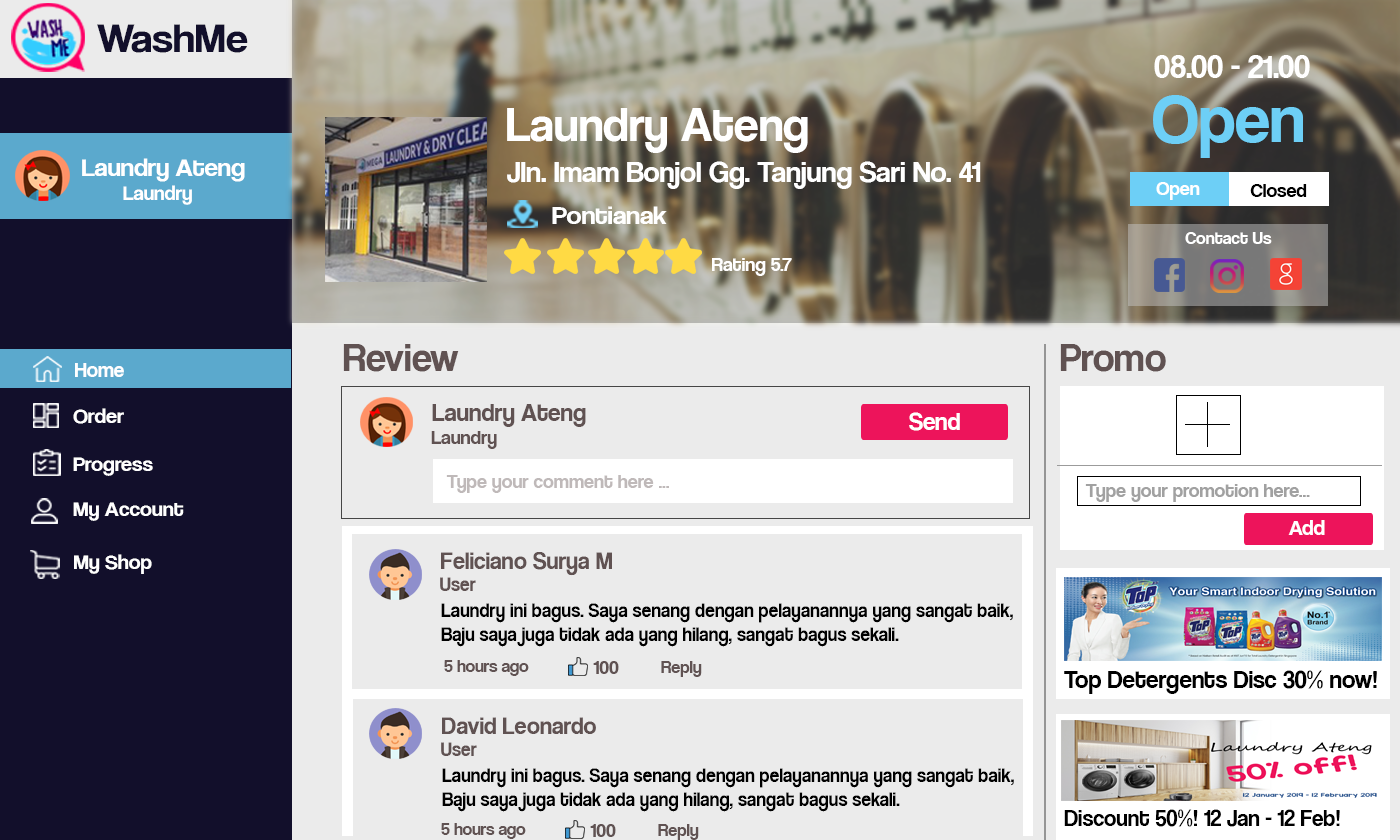
<style>
.page{position:relative;width:1400px;height:840px;background:#ebebeb}
.page>*{position:absolute;margin:0}
.t1{font:42.1px "CoolveticaRg-Regular";color:#120f2b;scale:1.05 1}
.t2{font:33px "CoolveticaRg-Regular";color:#ffffff}
.t3{font:70.4px "CoolveticaRg-Regular";color:#6dcff6}
.t4{font:48.8px "CoolveticaRg-Regular";color:#ffffff}
.t5{font:25.2px "CoolveticaRg-Regular";color:#ffffff;scale:1.05 1}
.t6{font:20px "CoolveticaRg-Regular";color:#ffffff;scale:1.05 1}
.t7{font:30px "CoolveticaRg-Regular";color:#ffffff}
.t8{font:20px "CoolveticaRg-Regular";color:#ffffff}
.t9{font:20px "CoolveticaRg-Regular";color:#000000}
.t10{font:25.6px "CoolveticaRg-Regular";color:#ffffff;scale:1.08 1}
.t11{font:18px "CoolveticaRg-Regular";color:#ffffff}
.t12{font:40px "CoolveticaRg-Regular";color:#605252}
.t13{font:21px "CoolveticaRg-Regular";color:#ffffff}
.t14{font:21px "CoolveticaRg-Regular";color:#ffffff;scale:1.05 1}
.t15{font:25px "CoolveticaRg-Regular";color:#605252}
.t16{font:25px "CoolveticaRg-Regular";color:#ffffff}
.t17{font:20px "CoolveticaRg-Regular";color:#605252}
.t18{font:20px "CoolveticaRg-Regular";color:#bfb9b9}
.t19{font:20px "CoolveticaRg-Regular";color:#a1a1a1}
.t20{font:22.2px "CoolveticaRg-Regular";color:#ffffff}
.t21{font:24.7px "CoolveticaRg-Regular";color:#605252}
.t22{font:19.7px "CoolveticaRg-Regular";color:#605252}
.t23{font:19.7px "CoolveticaRg-Regular";color:#000000}
.t24{font:17.8px "CoolveticaRg-Regular";color:#605252}
.t25{font:18px "CoolveticaRg-Regular";color:#605252}
.t26{font:25px "CoolveticaRg-Regular";color:#000000}
.t27{font:23px "CoolveticaRg-Regular";color:#000000}
</style>
<div class="page">
<p class="t1" style="left:97px;top:24px;width:151px;height:29px">WashMe</p>
<p class="t2" style="left:1154px;top:55px;width:156px;height:23px">08.00 - 21.00</p>
<p class="t3" style="left:1153px;top:95px;width:150px;height:63px">Open</p>
<p class="t4" style="left:507px;top:108px;width:301px;height:45px">Laundry Ateng</p>
<p class="t5" style="left:82px;top:158px;width:163px;height:47px">Laundry Ateng<br><span class="t6">        Laundry</span></p>
<p class="t7" style="left:507px;top:161px;width:474px;height:28px">Jln. Imam Bonjol Gg. Tanjung Sari No. 41</p>
<p class="t8" style="left:1156px;top:182px;width:44px;height:18px">Open</p>
<p class="t9" style="left:1250px;top:184px;width:57px;height:13px">Closed</p>
<p class="t10" style="left:552px;top:206px;width:115px;height:18px">Pontianak</p>
<p class="t11" style="left:1185px;top:232px;width:87px;height:12px">Contact Us</p>
<p class="t8" style="left:712px;top:258px;width:80px;height:18px">Rating 5.7</p>
<p class="t12" style="left:343px;top:344px;width:116px;height:28px">Review</p>
<p class="t12" style="left:1060px;top:344px;width:106px;height:28px">Promo</p>
<p class="t13" style="left:75px;top:363px;width:49px;height:14px">Home</p>
<p class="t14" style="left:73px;top:408px;width:51px;height:16px">Order</p>
<p class="t15" style="left:432px;top:404px;width:154px;height:23px">Laundry Ateng</p>
<p class="t16" style="left:909px;top:412px;width:51px;height:19px">Send</p>
<p class="t17" style="left:431px;top:431px;width:66px;height:18px">Laundry</p>
<p class="t14" style="left:73px;top:457px;width:80px;height:19px">Progress</p>
<p class="t18" style="left:446px;top:475px;width:223px;height:18px">Type your comment here ...</p>
<p class="t19" style="left:1085px;top:484px;width:225px;height:18px">Type your promotion here...</p>
<p class="t14" style="left:73px;top:502px;width:111px;height:19px">My Account</p>
<p class="t20" style="left:1288px;top:520px;width:37px;height:15px">Add</p>
<p class="t14" style="left:74px;top:554px;width:78px;height:20px">My Shop</p>
<p class="t21" style="left:441px;top:552px;width:171px;height:24px">Feliciano Surya M</p>
<p class="t22" style="left:440px;top:577px;width:36px;height:14px">User</p>
<p class="t23" style="left:441px;top:603px;width:572px;height:44px">Laundry ini bagus. Saya senang dengan pelayanannya yang sangat baik,<br>Baju saya juga tidak ada yang hilang, sangat bagus sekali.</p>
<p class="t24" style="left:444px;top:660px;width:85px;height:16px">5 hours ago</p>
<p class="t17" style="left:593px;top:661px;width:26px;height:13px">100</p>
<p class="t25" style="left:661px;top:661px;width:41px;height:16px">Reply</p>
<p class="t26" style="left:1064px;top:670px;width:313px;height:24px">Top Detergents Disc 30% now!</p>
<p class="t21" style="left:442px;top:717px;width:154px;height:17px">David Leonardo</p>
<p class="t22" style="left:441px;top:742px;width:36px;height:14px">User</p>
<p class="t23" style="left:442px;top:768px;width:572px;height:44px">Laundry ini bagus. Saya senang dengan pelayanannya yang sangat baik,<br>Baju saya juga tidak ada yang hilang, sangat bagus sekali.</p>
<p class="t27" style="left:1064px;top:809px;width:276px;height:18px">Discount 50%! 12 Jan - 12 Feb!</p>
<p class="t24" style="left:441px;top:823px;width:85px;height:16px">5 hours ago</p>
<p class="t17" style="left:590px;top:824px;width:26px;height:13px">100</p>
<p class="t25" style="left:658px;top:824px;width:41px;height:16px">Reply</p>
</div>
